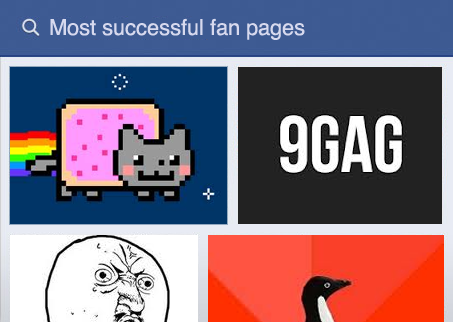
<style>
.page{position:relative;width:453px;height:322px}
.page>*{position:absolute;margin:0}
.t1{font:22px "Helvetica";color:#d7d9ee}
</style>
<div class="page">
<p class="t1" style="left:50px;top:18px;width:255px;height:22px">Most successful fan pages</p>
</div>
